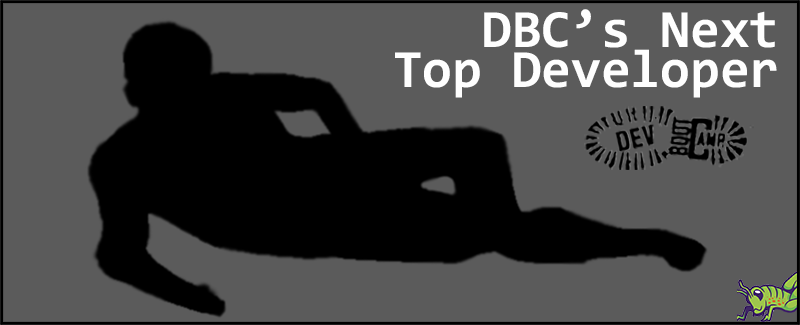
<style>
.page{position:relative;width:800px;height:325px;background:#5b5b5b}
.page>*{position:absolute;margin:0}
.t1{font:54px/40.5px "Consolas-Bold";color:#fefefe}
</style>
<div class="page">
<p class="t1" style="left:395px;top:9px;width:382px;height:89px;text-align:right">DBC’s Next<br>Top Developer</p>
</div>
